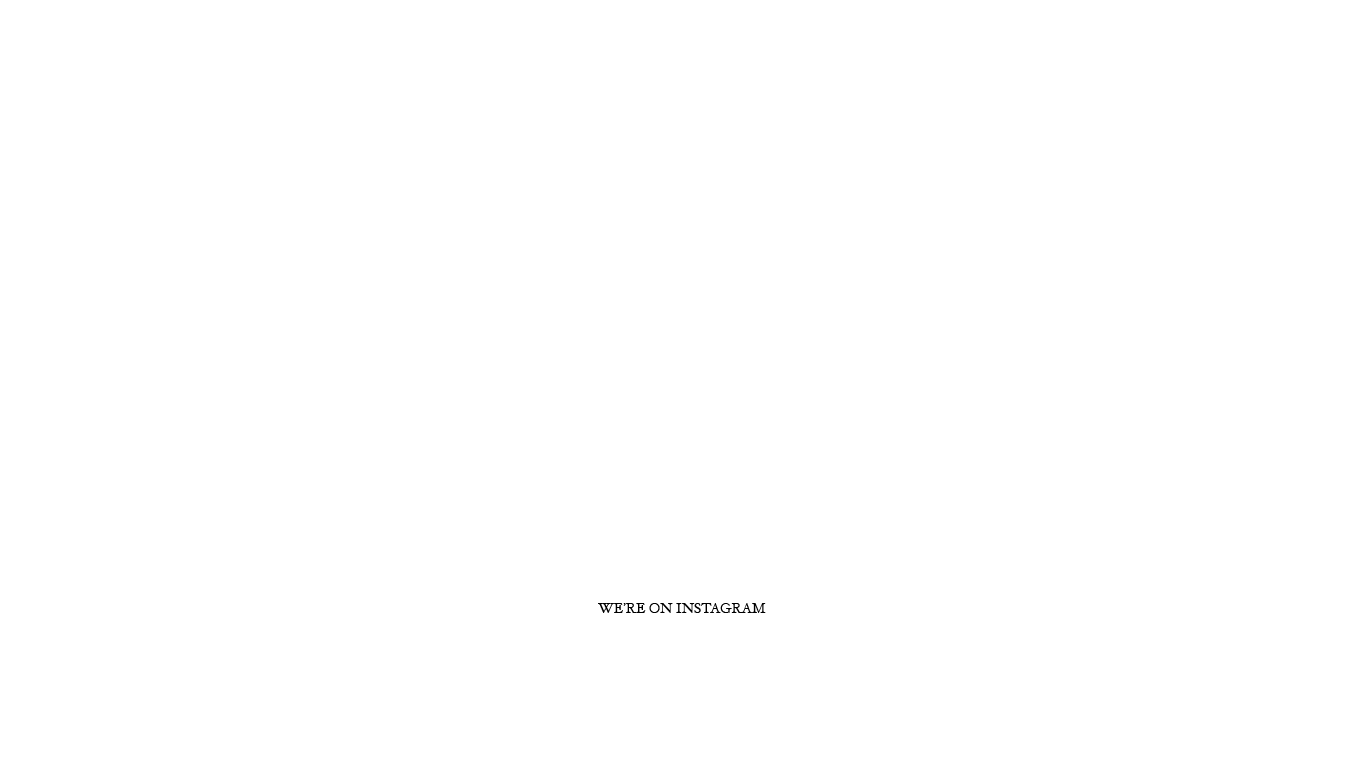
<style>
.page{position:relative;width:1366px;height:768px;background:#ffffff}
.page>*{position:absolute;margin:0}
.t1{font:14px "HoeflerText-Regular";color:#000000}
</style>
<div class="page">
<p class="t1" style="left:598px;top:603px;width:168px;height:10px">WE’RE ON INSTAGRAM</p>
</div>
